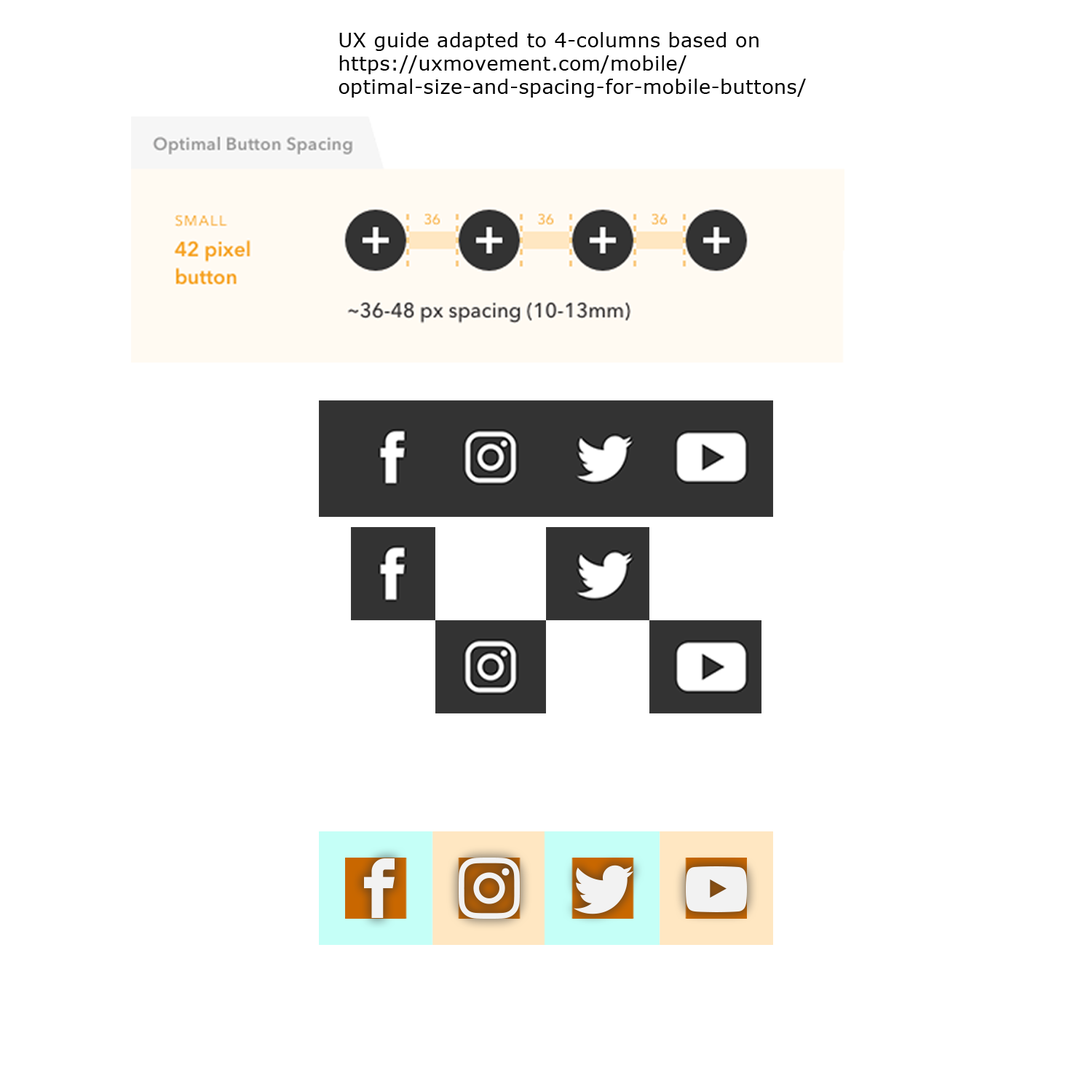
<style>
.page{position:relative;width:1092px;height:1092px;background:#ffffff}
.page>*{position:absolute;margin:0}
.t1{font:19.4px "Verdana";letter-spacing:0.025em;color:#000000}
</style>
<div class="page">
<p class="t1" style="left:339px;top:32px;width:467px;height:66px">UX guide adapted to 4-columns based on<br>https://uxmovement.com/mobile/<br>optimal-size-and-spacing-for-mobile-buttons/</p>
</div>
